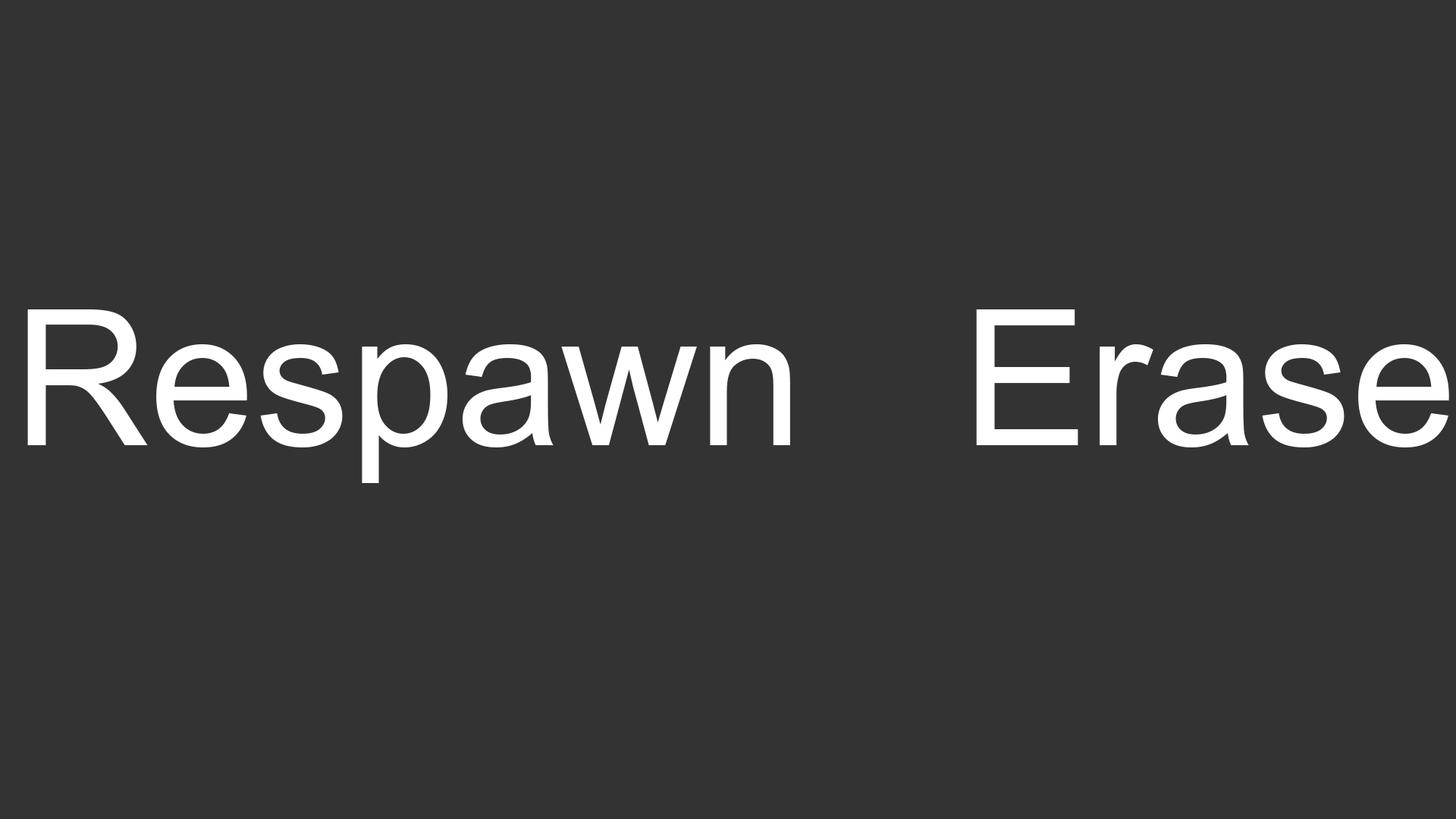
<style>
.page{position:relative;width:1456px;height:819px;background:#333333}
.page>*{position:absolute;margin:0}
.t1{font:189.6px "ArialMT";color:#ffffff}
</style>
<div class="page">
<p class="t1" style="left:27px;top:309px;width:1422px;height:174px">Respawn   Erase</p>
</div>
